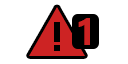
<style>
.page{position:relative;width:128px;height:64px;background:#ffffff}
.page>*{position:absolute;margin:0}
.t1{font:38.4px "SegoeUI-Bold";color:#cd2323;scale:0.96 1}
</style>
<div class="page">
<p class="t1" style="left:78px;top:18px;width:12px;height:27px">1</p>
</div>
